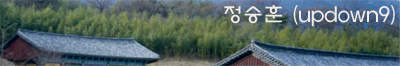
<style>
.page{position:relative;width:400px;height:66px}
.page>*{position:absolute;margin:0}
.t1{font:20px "ExpoL-HM";letter-spacing:0.025em;color:#f3ece6}
</style>
<div class="page">
<p class="t1" style="left:224px;top:5px;width:171px;height:22px">정승훈 (updown9)</p>
</div>
